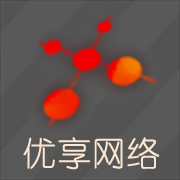
<style>
.page{position:relative;width:180px;height:180px}
.page>*{position:absolute;margin:0}
.t1{font:33.6px "YouYuan";color:#fce7d2;font-weight:bold}
</style>
<div class="page">
<p class="t1" style="left:23px;top:137px;width:137px;height:33px">优享网络</p>
</div>
